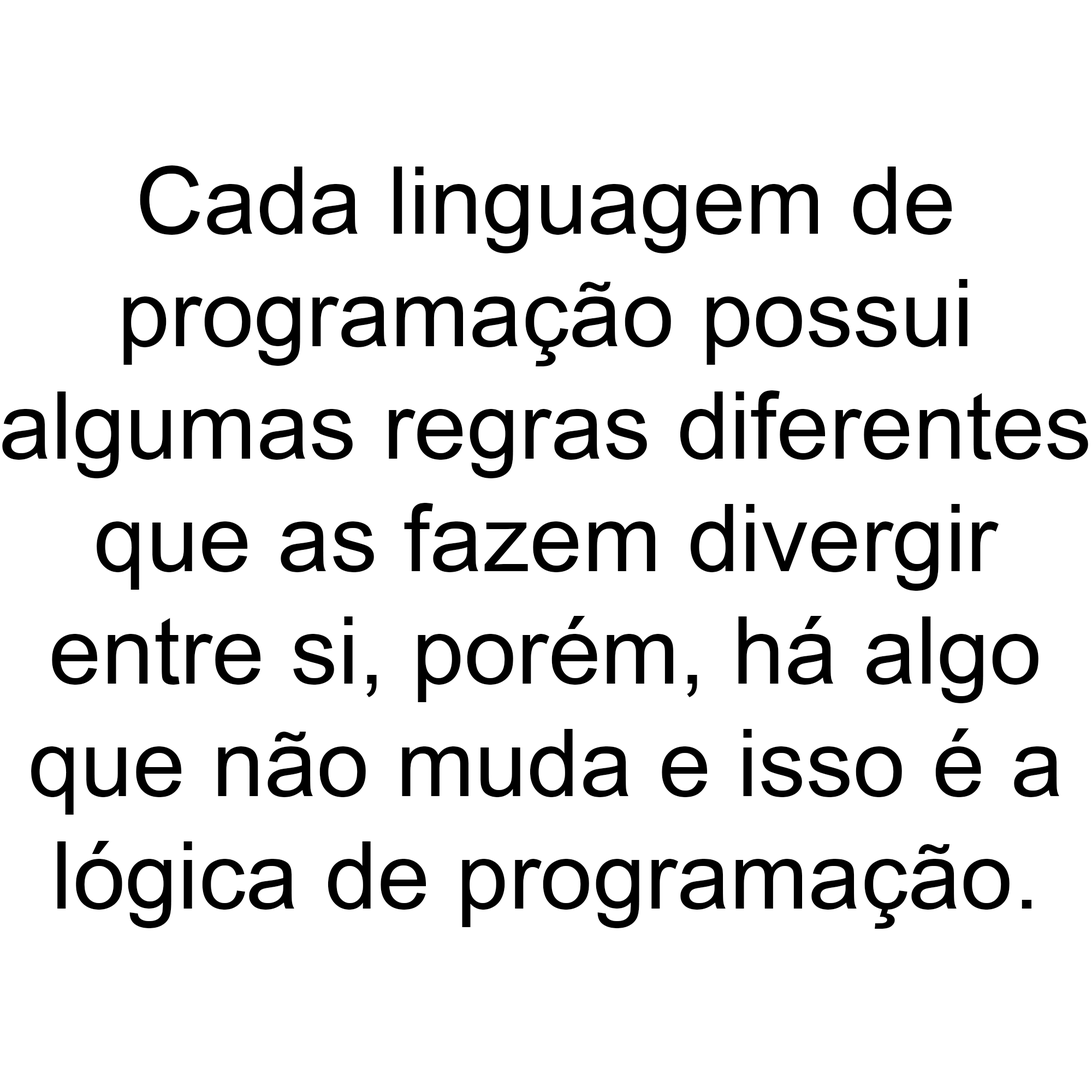
<style>
.page{position:relative;width:1092px;height:1092px;background:#ffffff}
.page>*{position:absolute;margin:0}
.t1{font:93.7px "ArialMT";color:#000000}
</style>
<div class="page">
<p class="t1" style="left:2px;top:165px;width:1086px;height:764px;text-align:center">Cada linguagem de<br>programação possui<br>algumas regras diferentes<br>que as fazem divergir<br>entre si, porém, há algo<br>que não muda e isso é a<br>lógica de programação.</p>
</div>
